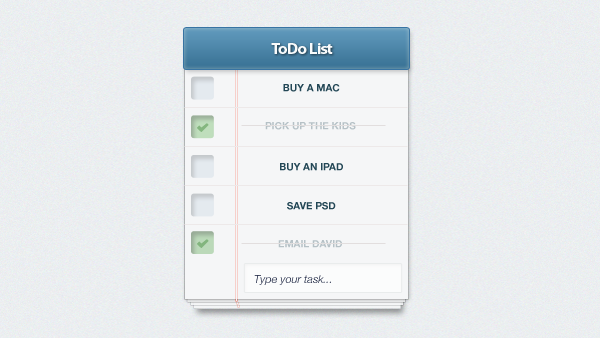
<style>
.page{position:relative;width:600px;height:338px}
.page>*{position:absolute;margin:0}
.t1{font:16px "MyriadPro-Bold";letter-spacing:-0.05em;color:#f9fbfc;scale:1.05 1}
.t2{font:10px "HelveticaNeue-Bold";color:#234756}
.t3{font:10px "HelveticaNeue-Bold";color:#b6c1c6}
.t4{font:11px "HelveticaNeue-LightItalic"}
</style>
<div class="page">
<p class="t1" style="left:271px;top:43px;width:62px;height:11px">ToDo List</p>
<p class="t2" style="left:283px;top:84px;width:57px;height:8px">BUY A MAC</p>
<p class="t3" style="left:265px;top:122px;width:91px;height:8px">PICK UP THE KIDS</p>
<p class="t2" style="left:280px;top:163px;width:63px;height:8px">BUY AN IPAD</p>
<p class="t2" style="left:287px;top:202px;width:49px;height:8px">SAVE PSD</p>
<p class="t3" style="left:278px;top:240px;width:64px;height:8px">EMAIL DAVID</p>
<p class="t4" style="left:254px;top:275px;width:77px;height:10px">Type your task...</p>
</div>
